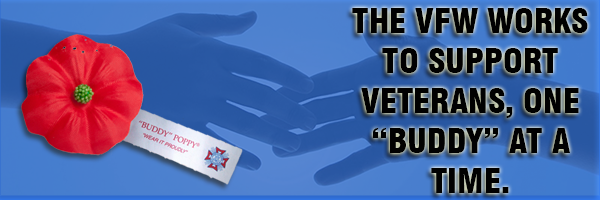
<style>
.page{position:relative;width:600px;height:200px}
.page>*{position:absolute;margin:0}
.t1{font:33.3px "Swiss721BT-BlackCondensed";color:#010101}
</style>
<div class="page">
<p class="t1" style="left:352px;top:8px;width:236px;height:185px;text-align:center">THE VFW WORKS TO SUPPORT VETERANS, ONE “BUDDY” AT A TIME.</p>
</div>
